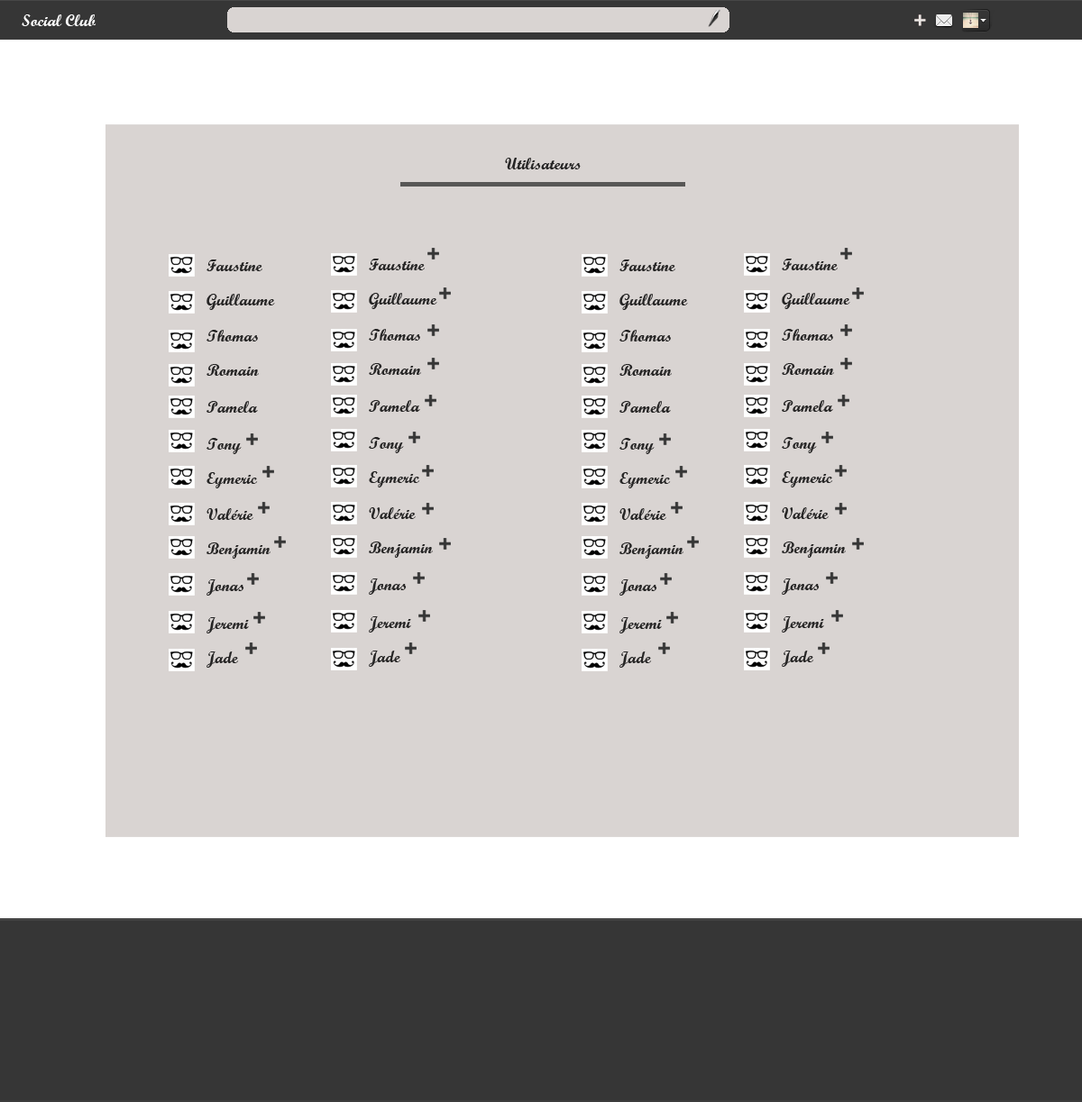
<style>
.page{position:relative;width:1082px;height:1102px;background:#d9d4d2}
.page>*{position:absolute;margin:0}
.t1{font:16.2px "ScriptMTBold";color:#fefefe}
.t2{font:16.2px "ScriptMTBold";color:#252424}
</style>
<div class="page">
<p class="t1" style="left:22px;top:14px;width:74px;height:12px">Social Club</p>
<p class="t2" style="left:505px;top:158px;width:75px;height:11px">Utilisateurs</p>
<p class="t2" style="left:206px;top:260px;width:56px;height:11px">Faustine</p>
<p class="t2" style="left:369px;top:259px;width:56px;height:11px">Faustine</p>
<p class="t2" style="left:619px;top:260px;width:56px;height:11px">Faustine</p>
<p class="t2" style="left:782px;top:259px;width:55px;height:11px">Faustine</p>
<p class="t2" style="left:206px;top:294px;width:69px;height:16px">Guillaume</p>
<p class="t2" style="left:369px;top:293px;width:68px;height:16px">Guillaume</p>
<p class="t2" style="left:619px;top:294px;width:69px;height:16px">Guillaume</p>
<p class="t2" style="left:782px;top:293px;width:68px;height:16px">Guillaume</p>
<p class="t2" style="left:206px;top:330px;width:52px;height:12px">Thomas</p>
<p class="t2" style="left:369px;top:329px;width:51px;height:12px">Thomas</p>
<p class="t2" style="left:619px;top:330px;width:52px;height:12px">Thomas</p>
<p class="t2" style="left:782px;top:329px;width:51px;height:12px">Thomas</p>
<p class="t2" style="left:206px;top:364px;width:53px;height:12px">Romain</p>
<p class="t2" style="left:369px;top:363px;width:52px;height:12px">Romain</p>
<p class="t2" style="left:619px;top:364px;width:53px;height:12px">Romain</p>
<p class="t2" style="left:782px;top:363px;width:52px;height:12px">Romain</p>
<p class="t2" style="left:206px;top:401px;width:52px;height:12px">Pamela</p>
<p class="t2" style="left:369px;top:400px;width:51px;height:12px">Pamela</p>
<p class="t2" style="left:619px;top:401px;width:52px;height:12px">Pamela</p>
<p class="t2" style="left:782px;top:400px;width:51px;height:12px">Pamela</p>
<p class="t2" style="left:369px;top:437px;width:35px;height:16px">Tony</p>
<p class="t2" style="left:782px;top:437px;width:35px;height:16px">Tony</p>
<p class="t2" style="left:206px;top:438px;width:36px;height:16px">Tony</p>
<p class="t2" style="left:619px;top:438px;width:35px;height:16px">Tony</p>
<p class="t2" style="left:206px;top:472px;width:52px;height:17px">Eymeric</p>
<p class="t2" style="left:369px;top:471px;width:51px;height:17px">Eymeric</p>
<p class="t2" style="left:619px;top:472px;width:52px;height:17px">Eymeric</p>
<p class="t2" style="left:782px;top:471px;width:51px;height:17px">Eymeric</p>
<p class="t2" style="left:206px;top:508px;width:47px;height:12px">Valérie</p>
<p class="t2" style="left:369px;top:507px;width:47px;height:12px">Valérie</p>
<p class="t2" style="left:619px;top:508px;width:47px;height:12px">Valérie</p>
<p class="t2" style="left:782px;top:507px;width:46px;height:12px">Valérie</p>
<p class="t2" style="left:206px;top:543px;width:64px;height:16px">Benjamin</p>
<p class="t2" style="left:369px;top:542px;width:64px;height:16px">Benjamin</p>
<p class="t2" style="left:619px;top:543px;width:64px;height:16px">Benjamin</p>
<p class="t2" style="left:782px;top:542px;width:64px;height:16px">Benjamin</p>
<p class="t2" style="left:206px;top:580px;width:38px;height:16px">Jonas</p>
<p class="t2" style="left:369px;top:579px;width:38px;height:16px">Jonas</p>
<p class="t2" style="left:619px;top:580px;width:38px;height:16px">Jonas</p>
<p class="t2" style="left:782px;top:579px;width:37px;height:16px">Jonas</p>
<p class="t2" style="left:206px;top:617px;width:43px;height:17px">Jeremi</p>
<p class="t2" style="left:369px;top:617px;width:42px;height:16px">Jeremi</p>
<p class="t2" style="left:619px;top:617px;width:43px;height:17px">Jeremi</p>
<p class="t2" style="left:782px;top:617px;width:42px;height:16px">Jeremi</p>
<p class="t2" style="left:206px;top:652px;width:33px;height:16px">Jade</p>
<p class="t2" style="left:369px;top:651px;width:32px;height:16px">Jade</p>
<p class="t2" style="left:619px;top:652px;width:33px;height:16px">Jade</p>
<p class="t2" style="left:782px;top:651px;width:32px;height:16px">Jade</p>
</div>
